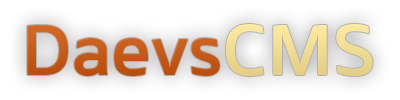
<style>
.page{position:relative;width:400px;height:100px;background:#ffffff}
.page>*{position:absolute;margin:0}
.t1{font:72px "Mentone-SemiBold";color:#d1570d}
.t2{font:72px "Mentone-SemiBold";color:#fde792}
</style>
<div class="page">
<p class="t1" style="left:27px;top:24px;width:346px;height:52px">Daevs<span class="t2">CMS</span></p>
</div>
